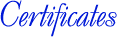
<style>
.page{position:relative;width:117px;height:37px;background:#ffffff}
.page>*{position:absolute;margin:0}
.t1{font:36px "UkrainianDecor";color:#0019d7}
</style>
<div class="page">
<p class="t1" style="left:0px;top:0px;width:117px;height:37px">Certificates</p>
</div>
